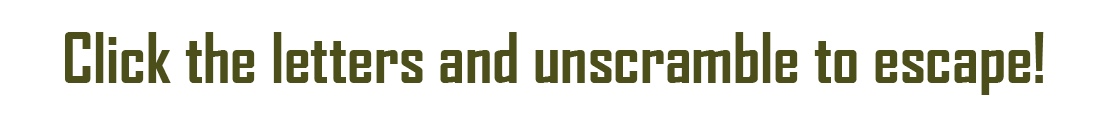
<style>
.page{position:relative;width:1108px;height:126px;background:#ffffff}
.page>*{position:absolute;margin:0}
.t1{font:66.7px "AgencyFB-Bold";color:#4c4f1a}
</style>
<div class="page">
<p class="t1" style="left:65px;top:32px;width:979px;height:63px">Click the letters and unscramble to escape!</p>
</div>
